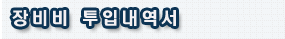
<style>
.page{position:relative;width:285px;height:39px;background:#f3f6f8}
.page>*{position:absolute;margin:0}
.t1{font:18px "ÇÑ¾ç°¡´ÂÇìµå¶óÀÎ";letter-spacing:0.1em;color:#f4f0f2}
</style>
<div class="page">
<p class="t1" style="left:12px;top:10px;width:164px;height:17px">장비비 투입내역서</p>
</div>
